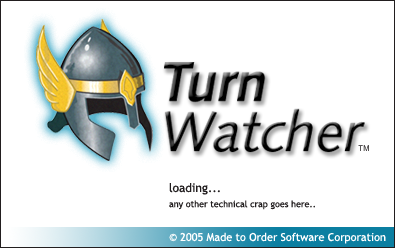
<style>
.page{position:relative;width:395px;height:248px;background:#ffffff}
.page>*{position:absolute;margin:0}
.t1{font:8px "TradeGothic"}
.t2{font:9px/15.2px "TrebuchetMS";color:#221e1f}
.t3{font:12px "TrebuchetMS";color:#221e1f}
.t4{font:11px "TrebuchetMS";color:#ffffff}
</style>
<div class="page">
<p class="t1" style="left:358px;top:145px;width:11px;height:6px">TM</p>
<p class="t2" style="left:169px;top:183px;width:146px;height:27px"><span class="t3">loading...<br></span>any other technical crap goes here..</p>
<p class="t4" style="left:169px;top:232px;width:217px;height:12px">© 2005 Made to Order Software Corporation</p>
</div>
